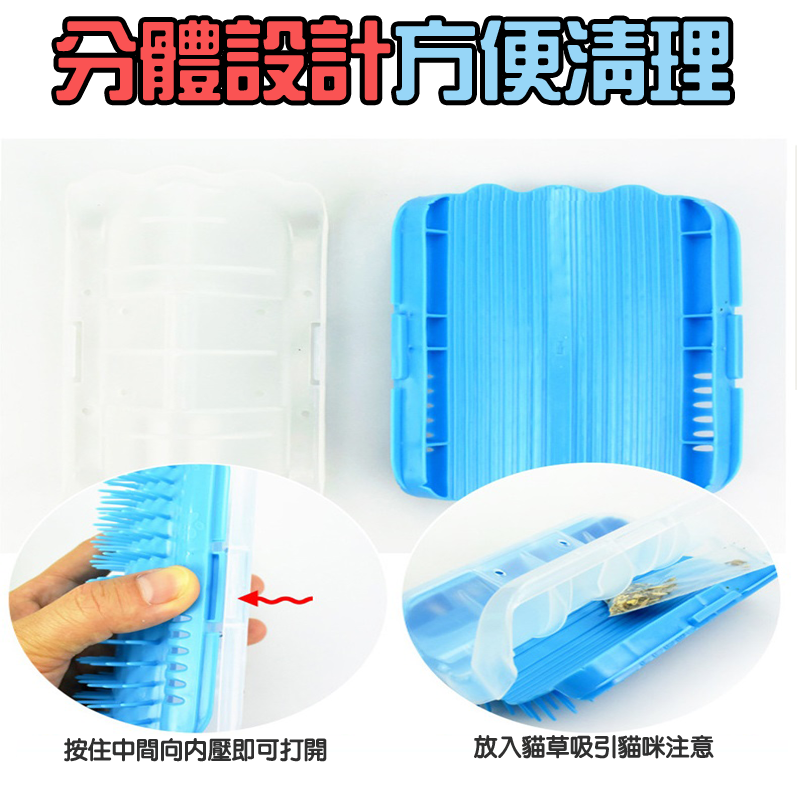
<style>
.page{position:relative;width:800px;height:800px}
.page>*{position:absolute;margin:0}
.t1{font:85px "HanWangZonYi";color:#fa5353}
.t2{font:85px "HanWangZonYi";color:#97d6f7}
.t3{font:24px "HanWangYenHeavy";color:#2f2f2f}
</style>
<div class="page">
<p class="t1" style="left:56px;top:20px;width:674px;height:81px">分體設計<span class="t2">方便清理</span></p>
<p class="t3" style="left:474px;top:735px;width:240px;height:24px">放入貓草吸引貓咪注意</p>
<p class="t3" style="left:64px;top:738px;width:263px;height:24px">按住中間向內壓即可打開</p>
</div>
